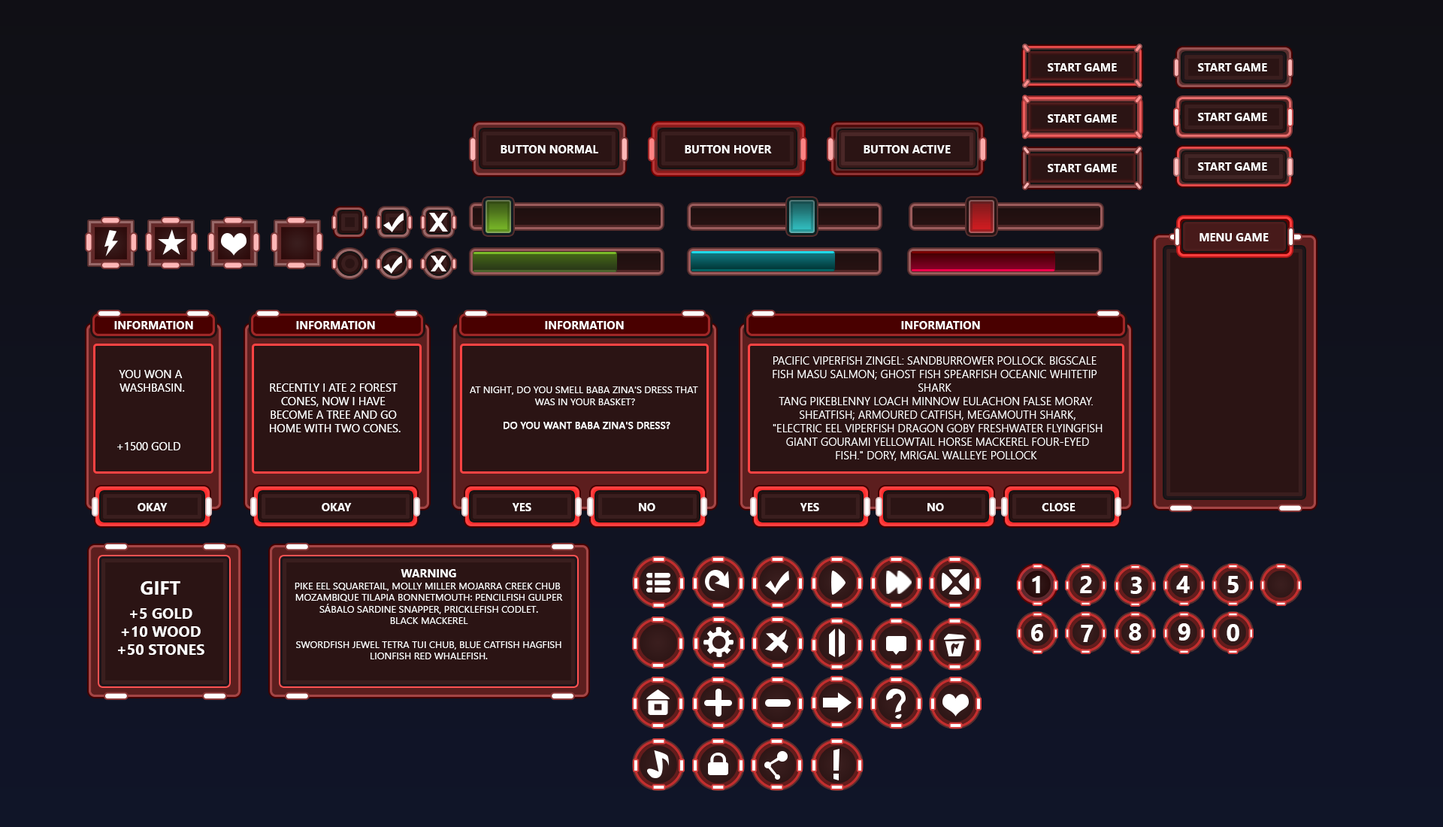
<style>
.page{position:relative;width:1443px;height:827px}
.page>*{position:absolute;margin:0}
.t1{font:11.3px "SegoeUI-Bold";color:#ffffff;text-transform:uppercase}
.t2{font:11.3px "SegoeUI-Semilight";color:#ffffff;text-transform:uppercase}
.t3{font:11.3px "SegoeUI";color:#ffffff;text-transform:uppercase}
.t4{font:9.8px "SegoeUI";color:#ffffff;text-transform:uppercase}
.t5{font:9.8px "SegoeUI";color:#ffffff;text-transform:uppercase;font-weight:bold}
.t6{font:15px "SegoeUI-Bold";color:#ffffff;text-transform:uppercase}
.t7{font:18.8px "SegoeUI-Bold";color:#ffffff;text-transform:uppercase}
.t8{font:18.8px/12px "SegoeUI-Bold";color:#ffffff;text-transform:uppercase}
.t9{font:15px/12px "SegoeUI-Bold";color:#ffffff;text-transform:uppercase}
.t10{font:23.9px "SegoeUI-Bold";color:#fefefe;text-transform:uppercase}
.t11{font:23.9px "SegoeUI-Bold";color:#ffffff;text-transform:uppercase}
</style>
<div class="page">
<p class="t1" style="left:1047px;top:63px;width:70px;height:8px">start game</p>
<p class="t1" style="left:1198px;top:63px;width:69px;height:8px">start game</p>
<p class="t1" style="left:1198px;top:113px;width:69px;height:8px">start game</p>
<p class="t1" style="left:1047px;top:114px;width:70px;height:8px">start game</p>
<p class="t1" style="left:500px;top:145px;width:98px;height:8px">button normal</p>
<p class="t1" style="left:685px;top:145px;width:87px;height:8px">button hover</p>
<p class="t1" style="left:863px;top:145px;width:88px;height:8px">button active</p>
<p class="t1" style="left:1047px;top:164px;width:70px;height:8px">start game</p>
<p class="t1" style="left:1198px;top:162px;width:69px;height:9px">start game</p>
<p class="t1" style="left:1199px;top:233px;width:69px;height:8px">menu game</p>
<p class="t1" style="left:114px;top:321px;width:79px;height:8px">information</p>
<p class="t1" style="left:296px;top:321px;width:79px;height:8px">information</p>
<p class="t1" style="left:545px;top:321px;width:79px;height:8px">information</p>
<p class="t1" style="left:901px;top:321px;width:79px;height:8px">information</p>
<p class="t2" style="left:772px;top:356px;width:330px;height:105px;text-align:center">Pacific viperfish zingel: sandburrower pollock. Bigscale <br>fish masu salmon; ghost fish spearfish oceanic whitetip <br>shark <br>tang pikeblenny loach minnow eulachon false moray.<br> Sheatfish; armoured catfish, megamouth shark,<br> "electric eel viperfish dragon goby freshwater flyingfish<br> giant gourami yellowtail horse mackerel four-eyed<br> fish." Dory, mrigal walleye pollock</p>
<p class="t3" style="left:119px;top:370px;width:66px;height:21px;text-align:center">You won a <br>washbasin.</p>
<p class="t3" style="left:270px;top:383px;width:130px;height:49px;text-align:center">Recently I ate 2 forest <br>cones, now I have <br>become a tree and go <br>home with two cones.</p>
<p class="t4" style="left:470px;top:386px;width:228px;height:43px;text-align:center">At night, do you smell Baba Zina's dress that <br>was in your basket?<br><br><span class="t5"> Do you want Baba Zina's dress?</span></p>
<p class="t3" style="left:117px;top:442px;width:63px;height:8px">+1500 gold</p>
<p class="t1" style="left:138px;top:503px;width:30px;height:8px">okay</p>
<p class="t1" style="left:322px;top:503px;width:30px;height:8px">okay</p>
<p class="t1" style="left:512px;top:503px;width:19px;height:8px">yes</p>
<p class="t1" style="left:639px;top:503px;width:16px;height:8px">no</p>
<p class="t1" style="left:799px;top:503px;width:20px;height:8px">yes</p>
<p class="t1" style="left:927px;top:503px;width:17px;height:8px">no</p>
<p class="t1" style="left:1041px;top:503px;width:34px;height:8px">close</p>
<p class="t4" style="left:295px;top:569px;width:268px;height:90px;text-align:center"><span class="t1">warning<br></span>Pike eel squaretail, Molly Miller mojarra creek chub <br>Mozambique tilapia bonnetmouth: pencilfish gulper<br> sábalo sardine snapper, pricklefish codlet. <br>Black mackerel<br><br> swordfish jewel tetra tui chub, blue catfish hagfish <br>lionfish Red whalefish.</p>
<p class="t6" style="left:118px;top:581px;width:86px;height:73px;text-align:center"><span class="t7">gift<br></span><span class="t8"><br></span><span class="t9">+5 gold<br></span>+10 wood<br>+50 stones</p>
<p class="t10" style="left:1032px;top:576px;width:8px;height:17px">1</p>
<p class="t11" style="left:1080px;top:576px;width:12px;height:17px">2</p>
<p class="t11" style="left:1130px;top:576px;width:12px;height:18px">3</p>
<p class="t11" style="left:1176px;top:576px;width:13px;height:17px">4</p>
<p class="t11" style="left:1227px;top:576px;width:11px;height:17px">5</p>
<p class="t11" style="left:1031px;top:624px;width:12px;height:17px">6</p>
<p class="t11" style="left:1081px;top:624px;width:12px;height:18px">7</p>
<p class="t11" style="left:1129px;top:623px;width:12px;height:17px">8</p>
<p class="t11" style="left:1177px;top:623px;width:13px;height:17px">9</p>
<p class="t11" style="left:1226px;top:624px;width:13px;height:17px">0</p>
</div>
